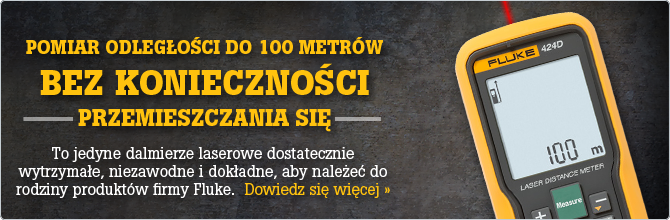
<style>
.page{position:relative;width:670px;height:220px}
.page>*{position:absolute;margin:0}
.t1{font:19px/44.8px "BotonPro-Bold";color:#ffc20e;text-transform:uppercase}
.t2{font:35px/41px "BotonPro-Bold";color:#ffc20e;text-transform:uppercase}
.t3{font:23px/31px "BotonPro-Bold";color:#ffc20e;text-transform:uppercase}
.t4{font:16px/18px "BotonPro-Regular";color:#ffffff}
.t5{font:16px/18px "BotonPro-Regular";color:#ffc20e}
</style>
<div class="page">
<p class="t1" style="left:26px;top:37px;width:357px;height:95px;text-align:center">Pomiar odległości do 100 metrów <span class="t2">bez konieczności <br></span><span class="t3">przemieszczania się</span></p>
<p class="t4" style="left:16px;top:147px;width:374px;height:51px;text-align:center">To jedyne dalmierze laserowe dostatecznie wytrzymałe, niezawodne i dokładne, aby należeć do rodziny produktów firmy Fluke.  <span class="t5">Dowiedz się więcej »</span></p>
</div>
